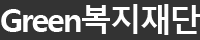
<style>
.page{position:relative;width:200px;height:40px;background:#333333}
.page>*{position:absolute;margin:0}
.t1{font:31.8px "MalgunGothicBold";letter-spacing:-0.06em;color:#ffffff}
</style>
<div class="page">
<p class="t1" style="left:1px;top:4px;width:200px;height:31px">Green복지재단</p>
</div>
